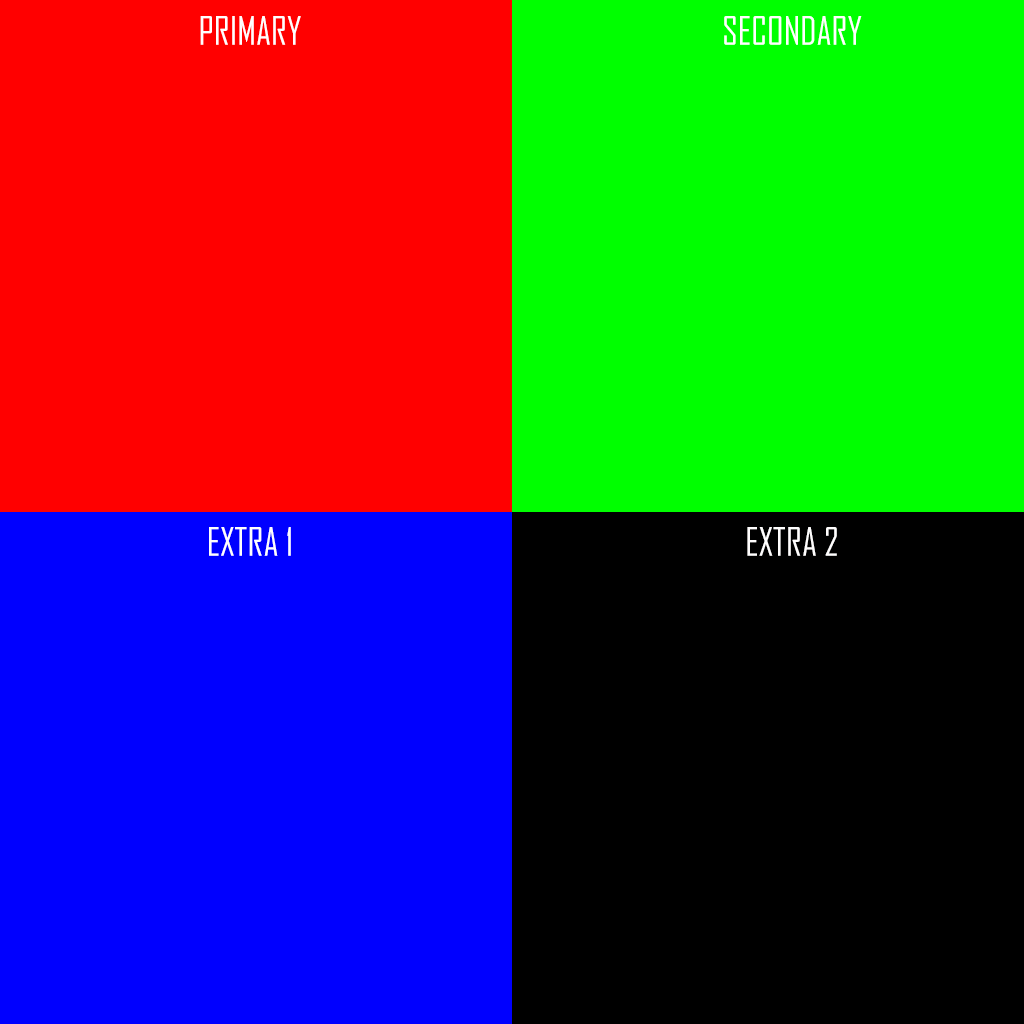
<style>
.page{position:relative;width:1024px;height:1024px;background:#0000ff}
.page>*{position:absolute;margin:0}
.t1{font:37.5px "AgencyFB-Reg";color:#fffefe;text-transform:uppercase}
</style>
<div class="page">
<p class="t1" style="left:200px;top:16px;width:101px;height:29px">Primary</p>
<p class="t1" style="left:724px;top:16px;width:138px;height:29px">Secondary</p>
<p class="t1" style="left:209px;top:527px;width:82px;height:29px">Extra 1</p>
<p class="t1" style="left:747px;top:527px;width:90px;height:29px">Extra 2</p>
</div>
